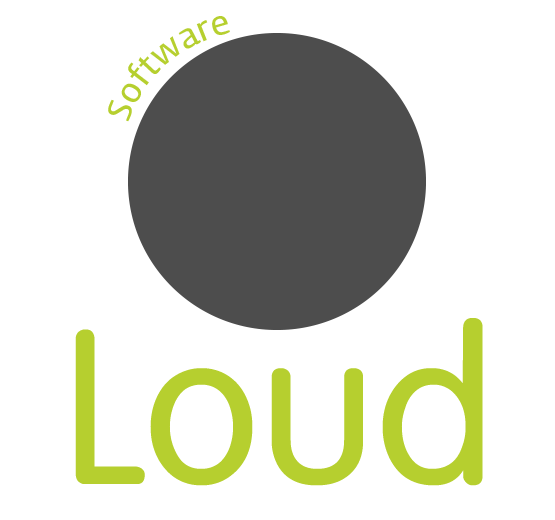
<style>
.page{position:relative;width:555px;height:520px;background:#ffffff}
.page>*{position:absolute;margin:0}
.t1{font:30.8px "Daum_Regular";color:#b6cf2f}
.t2{font:214.8px "UnDinaru";color:#b6cf2f}
</style>
<div class="page">
<p class="t1" style="left:108px;top:16px;width:122px;height:106px;rotate:-11deg">Software</p>
<p class="t2" style="left:75px;top:318px;width:408px;height:168px">Loud</p>
</div>
